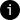
<style>
.page{position:relative;width:20px;height:20px;background:#000000}
.page>*{position:absolute;margin:0}
.t1{font:16px "LetterGothic12PitchBT-Roman"}
</style>
<div class="page">
<p class="t1" style="left:7px;top:4px;width:4px;height:11px">i</p>
</div>
